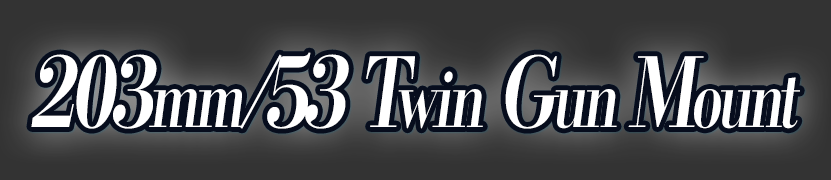
<style>
.page{position:relative;width:831px;height:180px;background:#333333}
.page>*{position:absolute;margin:0}
.t1{font:96px "KochoStd-Heavy";letter-spacing:-0.08em;color:#ffffff;font-style:italic;scale:0.75 1}
.t2{font:76.8px "KochoStd-Heavy";letter-spacing:-0.08em;color:#ffffff;font-style:italic;scale:0.75 1}
</style>
<div class="page">
<p class="t1" style="left:31px;top:52px;width:769px;height:77px">203<span class="t2">mm</span>/53 T<span class="t2">win</span> G<span class="t2">un </span>M<span class="t2">ount</span></p>
</div>
